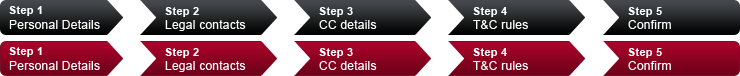
<style>
.page{position:relative;width:740px;height:76px;background:#ffffff}
.page>*{position:absolute;margin:0}
.t1{font:12px/15px "ArialMT";letter-spacing:0.02em;color:#ffffff}
.t2{font:11px/15px "Arial-BoldMT";letter-spacing:0.02em;color:#ffffff}
.t3{font:12px "ArialMT";letter-spacing:0.02em;color:#ffffff}
.t4{font:11px "Arial-BoldMT";letter-spacing:0.02em;color:#ffffff}
</style>
<div class="page">
<p class="t1" style="left:9px;top:6px;width:91px;height:23px"><span class="t2">Step 1<br></span>Personal Details</p>
<p class="t3" style="left:165px;top:7px;width:81px;height:24px"><span class="t4">Step 2<br></span>Legal contacts</p>
<p class="t3" style="left:319px;top:7px;width:58px;height:22px"><span class="t4">Step 3<br></span>CC details</p>
<p class="t3" style="left:473px;top:7px;width:55px;height:22px"><span class="t4">Step 4<br></span>T&amp;C rules</p>
<p class="t3" style="left:628px;top:7px;width:43px;height:22px"><span class="t4">Step 5<br></span>Confirm</p>
<p class="t1" style="left:9px;top:47px;width:91px;height:23px"><span class="t2">Step 1<br></span>Personal Details</p>
<p class="t3" style="left:165px;top:48px;width:81px;height:24px"><span class="t4">Step 2<br></span>Legal contacts</p>
<p class="t3" style="left:319px;top:48px;width:58px;height:22px"><span class="t4">Step 3<br></span>CC details</p>
<p class="t3" style="left:473px;top:48px;width:55px;height:22px"><span class="t4">Step 4<br></span>T&amp;C rules</p>
<p class="t3" style="left:628px;top:48px;width:43px;height:22px"><span class="t4">Step 5<br></span>Confirm</p>
</div>
